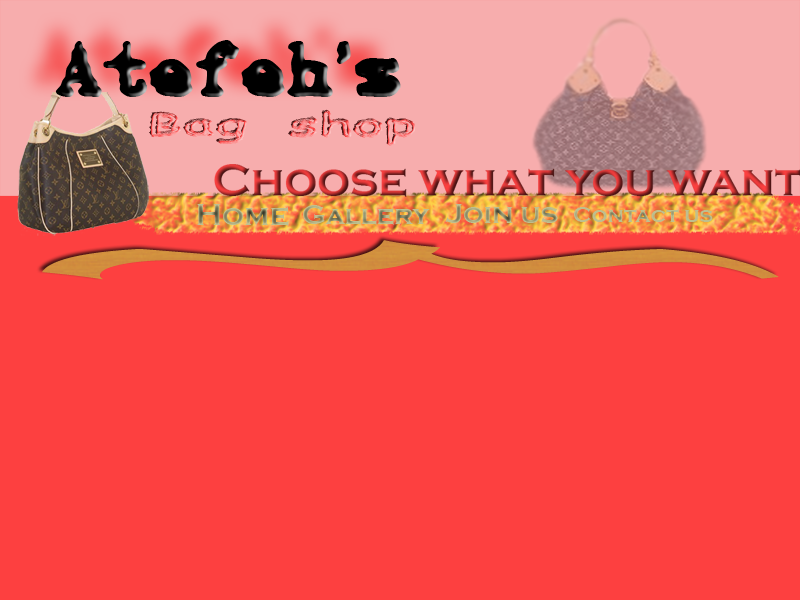
<style>
.page{position:relative;width:800px;height:600px;background:#fd4040}
.page>*{position:absolute;margin:0}
.t1{font:83.6px "3000";color:#000000}
.t2{font:33.6px "BeerGlass";scale:1.98 1}
.t3{font:30.9px "CopperplateGothic-Bold"}
.t4{font:27.6px "CopperplateGothic-Bold"}
.t5{font:29px "CopperplateGothic-Bold"}
.t6{font:22.2px "CopperplateGothic-Bold";color:#bfbf8e}
.t7{font:736.2px "LucidaBlackletter";color:#d18e3e;scale:0.18 1}
</style>
<div class="page">
<p class="t1" style="left:55px;top:40px;width:346px;height:57px">Atefeh's</p>
<p class="t2" style="left:149px;top:109px;width:267px;height:37px">Bag shop</p>
<p class="t3" style="left:197px;top:204px;width:92px;height:22px">Home</p>
<p class="t4" style="left:303px;top:205px;width:127px;height:20px">Gallery</p>
<p class="t5" style="left:445px;top:204px;width:113px;height:19px">Join us</p>
<p class="t6" style="left:574px;top:207px;width:139px;height:15px">Contact us</p>
<p class="t7" style="left:42px;top:240px;width:737px;height:40px;rotate:-90deg">}</p>
</div>
